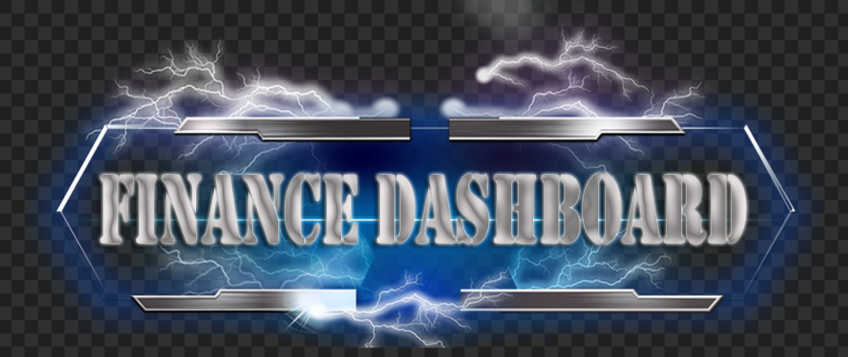
<style>
.page{position:relative;width:848px;height:357px}
.page>*{position:absolute;margin:0}
.t1{font:102.4px "Stencil";scale:0.62 1}
</style>
<div class="page">
<p class="t1" style="left:100px;top:173px;width:647px;height:72px">Finance Dashboard</p>
</div>
